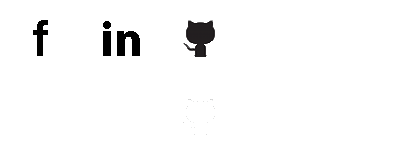
<style>
.page{position:relative;width:400px;height:160px;background:#ffffff}
.page>*{position:absolute;margin:0}
.t1{font:50px "HelveticaNeue-Medium";color:#010100}
.t2{font:50px "MyriadPro-Bold";color:#000000}
</style>
<div class="page">
<p class="t1" style="left:33px;top:20px;width:15px;height:36px">f</p>
<p class="t2" style="left:103px;top:21px;width:37px;height:35px">in</p>
</div>
